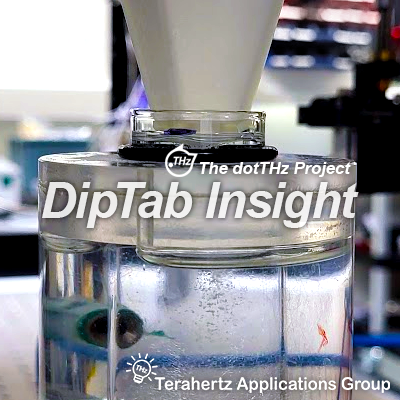
<style>
.page{position:relative;width:400px;height:400px}
.page>*{position:absolute;margin:0}
.t1{font:16.7px "Arial-BoldItalicMT";color:#ffffff}
.t2{font:50px "Arial-BoldItalicMT";letter-spacing:-0.025em;color:#ffffff}
</style>
<div class="page">
<p class="t1" style="left:199px;top:162px;width:152px;height:15px">The dotTHz Project</p>
<p class="t2" style="left:42px;top:182px;width:317px;height:46px;opacity:0.8">DipTab Insight</p>
</div>
